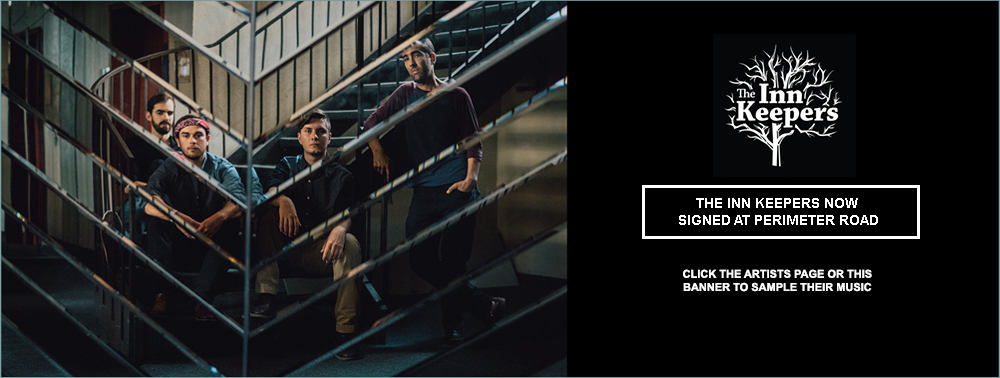
<style>
.page{position:relative;width:1000px;height:378px;background:#000000}
.page>*{position:absolute;margin:0}
.t1{font:14px "Arial-BoldMT";color:#ffffff}
.t2{font:11px "Arial-BoldMT";color:#ffffff}
</style>
<div class="page">
<p class="t1" style="left:679px;top:198px;width:199px;height:27px;text-align:center">THE INN KEEPERS NOW <br>SIGNED AT PERIMETER ROAD</p>
<p class="t2" style="left:683px;top:269px;width:189px;height:23px;text-align:center">CLICK THE ARTISTS PAGE OR THIS<br>BANNER TO SAMPLE THEIR MUSIC</p>
</div>
